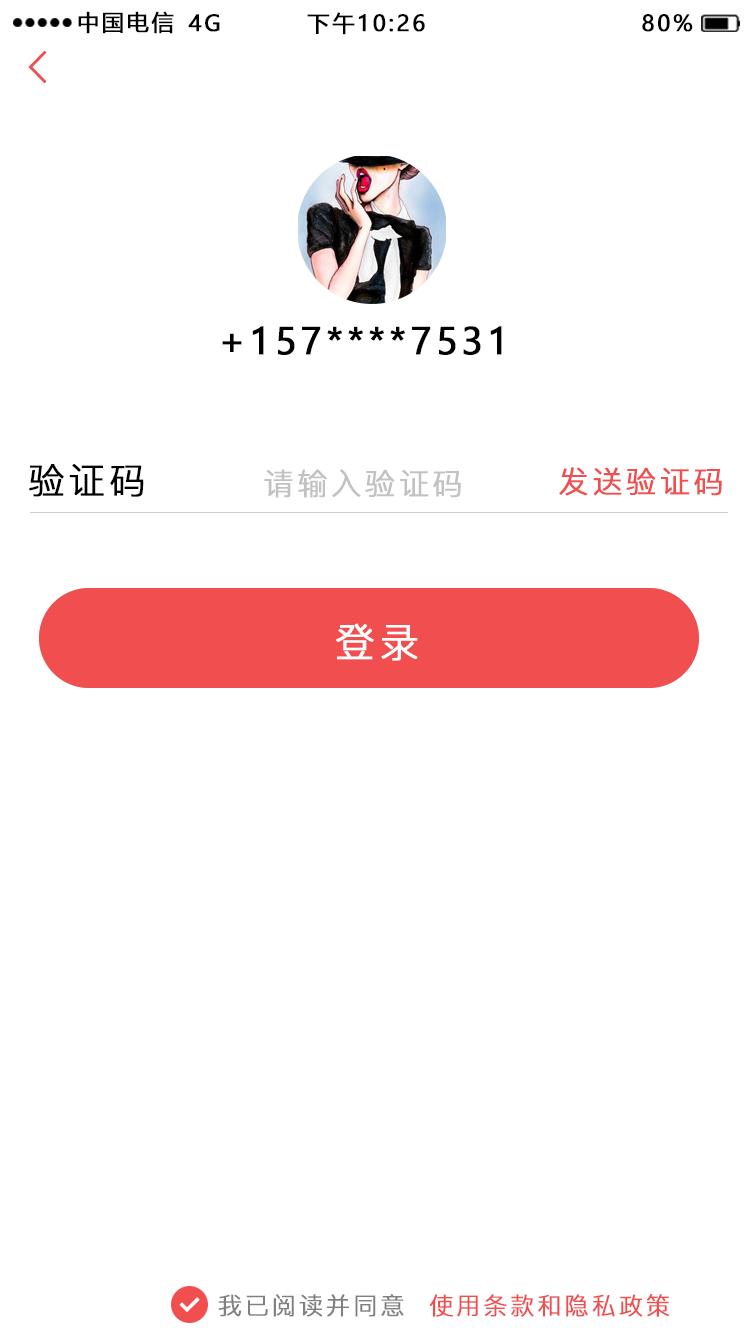
<style>
.page{position:relative;width:750px;height:1334px;background:#ffffff}
.page>*{position:absolute;margin:0}
.t1{font:22px "MicrosoftYaHei";letter-spacing:0.1em;color:#000000;text-transform:uppercase;font-weight:bold}
.t2{font:36px "MicrosoftYaHei";letter-spacing:0.1em;color:#000000;text-transform:uppercase;font-weight:bold}
.t3{font:36px "PingFang-SC-Regular";letter-spacing:0.1em;color:#000000;text-transform:uppercase;font-weight:bold}
.t4{font:30px "PingFang-SC-Regular";letter-spacing:0.1em;color:#c2c2c2;text-transform:uppercase;font-weight:bold}
.t5{font:30px "PingFang-SC-Regular";letter-spacing:0.1em;color:#f04e4f;text-transform:uppercase;font-weight:bold}
.t6{font:40px "PingFang-SC-Regular";letter-spacing:0.1em;color:#ffffff;text-transform:uppercase;font-weight:bold}
.t7{font:24px "PingFang-SC-Regular";letter-spacing:0.1em;color:#f04e4f;text-transform:uppercase;font-weight:bold}
.t8{font:24px "PingFang-SC-Regular";letter-spacing:0.1em;color:#808080;text-transform:uppercase;font-weight:bold}
</style>
<div class="page">
<p class="t1" style="left:78px;top:11px;width:96px;height:23px">中国电信</p>
<p class="t1" style="left:188px;top:14px;width:32px;height:18px">4G</p>
<p class="t1" style="left:307px;top:12px;width:118px;height:23px">下午10:26</p>
<p class="t1" style="left:642px;top:14px;width:51px;height:18px">80%</p>
<p class="t2" style="left:222px;top:326px;width:280px;height:29px">+157****7531</p>
<p class="t3" style="left:29px;top:464px;width:115px;height:33px">验证码</p>
<p class="t4" style="left:264px;top:469px;width:197px;height:29px">请输入验证码</p>
<p class="t5" style="left:559px;top:467px;width:163px;height:29px">发送验证码</p>
<p class="t6" style="left:336px;top:623px;width:82px;height:38px">登录</p>
<p class="t7" style="left:218px;top:1294px;width:452px;height:23px"><span class="t8">我已阅读并同意  </span>使用条款和隐私政策</p>
</div>
